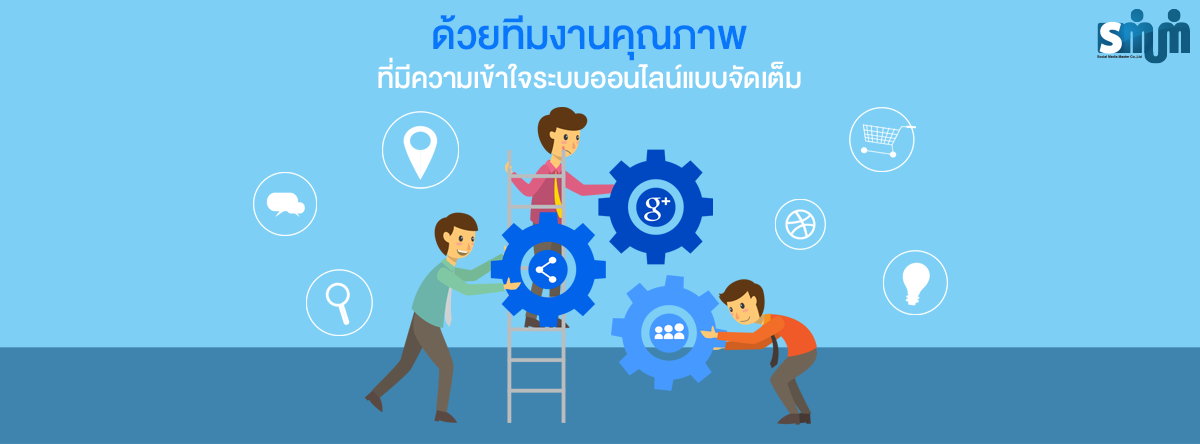
<style>
.page{position:relative;width:1200px;height:444px;background:#7dcff5}
.page>*{position:absolute;margin:0}
.t1{font:39.6px/39.5px "DBHeavent-Med";color:#ffffff}
.t2{font:56.8px/46.6px "DBHeavent-Med";color:#0876fa}
</style>
<div class="page">
<p class="t1" style="left:378px;top:15px;width:423px;height:74px;text-align:center"><span class="t2">ด้วยทีมงานคุณภาพ<br></span>ที่มีความเข้าใจระบบออนไลน์แบบจัดเต็ม</p>
</div>
